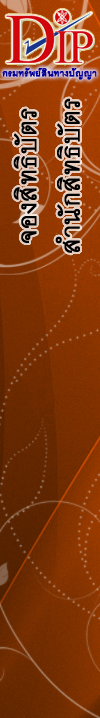
<style>
.page{position:relative;width:100px;height:718px}
.page>*{position:absolute;margin:0}
.t1{font:12.5px "CordiaUPC";color:#000099;font-weight:bold;scale:1.05 1}
.t2{font:36px "CordiaUPC";color:#000000;font-weight:bold}
</style>
<div class="page">
<p class="t1" style="left:2px;top:68px;width:95px;height:12px">กรมทรัพย์สินทางปัญญา</p>
<p class="t2" style="left:13px;top:98px;width:67px;height:155px;text-align:center;rotate:-90deg">จองสิทธิบัตร<br>สำนักสิทธิบัตร</p>
</div>
